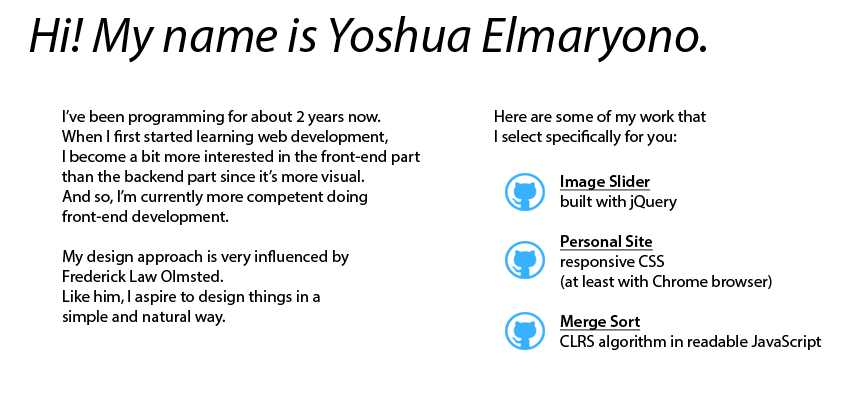
<style>
.page{position:relative;width:850px;height:400px;background:#ffffff}
.page>*{position:absolute;margin:0}
.t1{font:50px "MyriadPro-It";color:#000000}
.t2{font:16.7px "MyriadPro-Regular";color:#000000}
.t3{font:16.7px "MyriadPro-Semibold";color:#000000;text-decoration:underline}
</style>
<div class="page">
<p class="t1" style="left:29px;top:16px;width:677px;height:47px">Hi! My name is Yoshua Elmaryono.</p>
<p class="t2" style="left:62px;top:110px;width:358px;height:216px">I’ve been programming for about 2 years now. <br>When I first started learning web development,<br>I become a bit more interested in the front-end part<br>than the backend part since it’s more visual.<br>And so, I’m currently more competent doing<br>front-end development.<br><br>My design approach is very influenced by<br>Frederick Law Olmsted.<br>Like him, I aspire to design things in a<br>simple and natural way.</p>
<p class="t2" style="left:495px;top:110px;width:211px;height:36px">Here are some of my work that <br>I select specifically for you:</p>
<p class="t2" style="left:560px;top:175px;width:262px;height:175px"><span class="t3">Image Slider<br></span>built with jQuery<br><br><span class="t3">Personal Site<br></span>responsive CSS <br>(at least with Chrome browser)<br><br><span class="t3">Merge Sort<br></span>CLRS algorithm in readable JavaScript</p>
</div>
